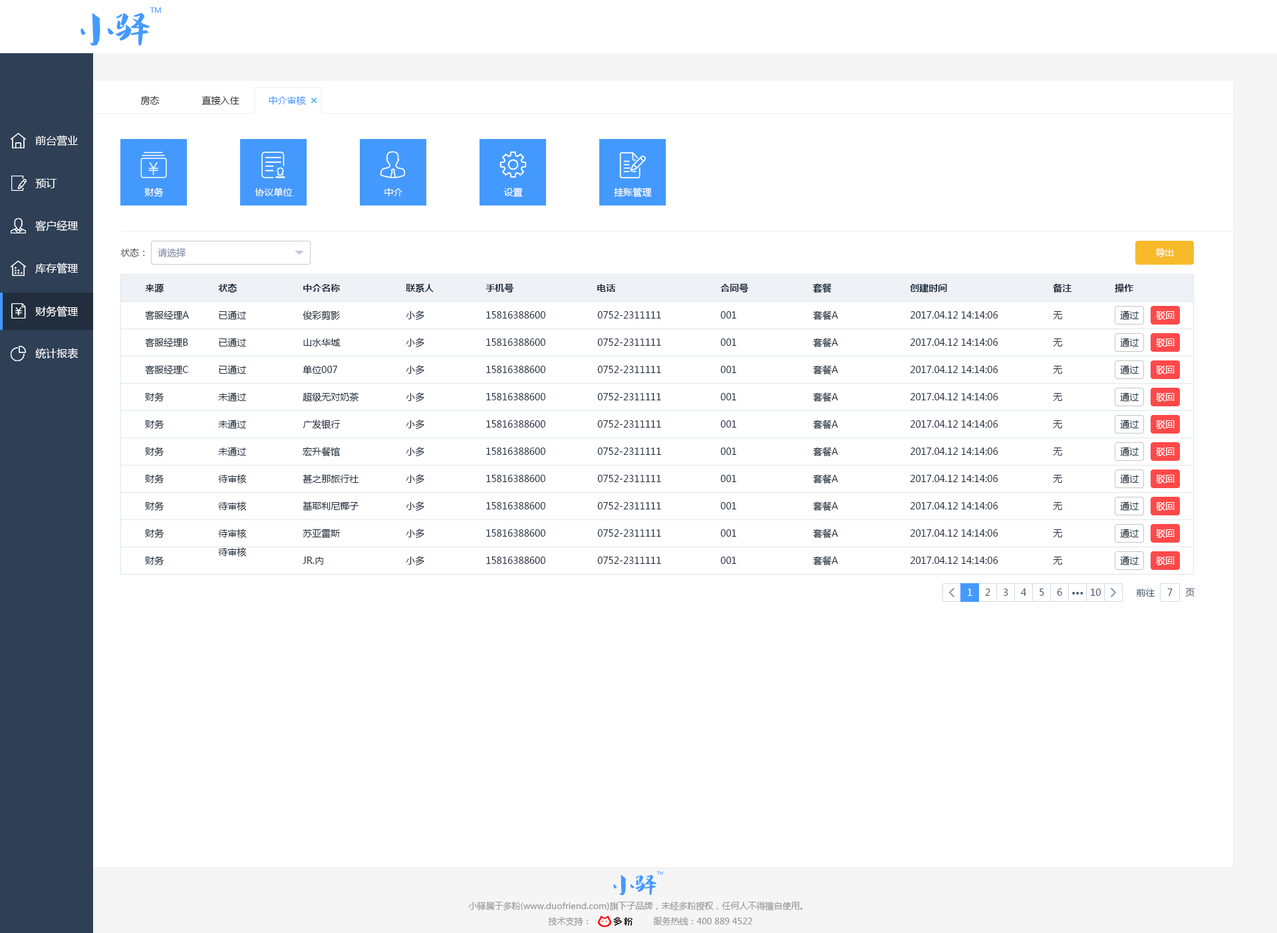
<style>
.page{position:relative;width:1277px;height:933px;background:#ffffff}
.page>*{position:absolute;margin:0}
.t1{font:9.3px "MicrosoftYaHei";color:#333333}
.t2{font:9.3px "MicrosoftYaHei";color:#4499ff}
.t3{font:10.6px "MicrosoftYaHei";color:#ffffff}
.t4{font:9.3px "MicrosoftYaHei";color:#ffffff}
.t5{font:9.3px "MicrosoftYaHei";color:#505050}
.t6{font:9.3px "MicrosoftYaHei";color:#8391a5}
.t7{font:9.3px "MicrosoftYaHei-Bold";color:#1f2d3d}
.t8{font:9.3px "MicrosoftYaHei";color:#1f2d3d}
.t9{font:9.3px "MicrosoftYaHei";color:#48576a}
.t10{font:9.3px "MicrosoftYaHei-Bold";color:#48576a}
.t11{font:8.6px "MicrosoftYaHei";color:#999999}
</style>
<div class="page">
<p class="t1" style="left:140px;top:96px;width:20px;height:9px">房态</p>
<p class="t1" style="left:202px;top:96px;width:38px;height:9px">直接入住</p>
<p class="t2" style="left:269px;top:96px;width:37px;height:10px">中介审核</p>
<p class="t3" style="left:35px;top:135px;width:44px;height:11px">前台营业</p>
<p class="t3" style="left:35px;top:178px;width:22px;height:10px">预订</p>
<p class="t4" style="left:144px;top:188px;width:20px;height:9px">财务</p>
<p class="t4" style="left:255px;top:188px;width:38px;height:9px">协议单位</p>
<p class="t4" style="left:385px;top:188px;width:18px;height:8px">中介</p>
<p class="t4" style="left:504px;top:188px;width:19px;height:9px">设置</p>
<p class="t4" style="left:614px;top:188px;width:38px;height:10px">挂账管理</p>
<p class="t3" style="left:35px;top:220px;width:44px;height:12px">客户经理</p>
<p class="t5" style="left:120px;top:248px;width:25px;height:9px">状态：</p>
<p class="t6" style="left:158px;top:248px;width:28px;height:9px">请选择</p>
<p class="t4" style="left:1156px;top:248px;width:18px;height:9px">导出</p>
<p class="t3" style="left:35px;top:263px;width:44px;height:11px">库存管理</p>
<p class="t7" style="left:145px;top:283px;width:19px;height:10px">来源</p>
<p class="t7" style="left:218px;top:283px;width:19px;height:10px">状态</p>
<p class="t7" style="left:303px;top:284px;width:37px;height:8px">中介名称</p>
<p class="t7" style="left:406px;top:283px;width:28px;height:10px">联系人</p>
<p class="t7" style="left:486px;top:283px;width:28px;height:10px">手机号</p>
<p class="t7" style="left:597px;top:284px;width:19px;height:8px">电话</p>
<p class="t7" style="left:721px;top:283px;width:27px;height:10px">合同号</p>
<p class="t7" style="left:813px;top:283px;width:19px;height:10px">套餐</p>
<p class="t7" style="left:910px;top:283px;width:37px;height:10px">创建时间</p>
<p class="t7" style="left:1053px;top:283px;width:20px;height:10px">备注</p>
<p class="t7" style="left:1115px;top:283px;width:19px;height:10px">操作</p>
<p class="t3" style="left:35px;top:306px;width:44px;height:11px">财务管理</p>
<p class="t8" style="left:145px;top:311px;width:44px;height:9px">客服经理A</p>
<p class="t8" style="left:219px;top:311px;width:27px;height:9px">已通过</p>
<p class="t8" style="left:303px;top:311px;width:37px;height:10px">俊彩剪影</p>
<p class="t8" style="left:406px;top:311px;width:18px;height:10px">小多</p>
<p class="t8" style="left:486px;top:311px;width:60px;height:8px">15816388600</p>
<p class="t8" style="left:597px;top:311px;width:64px;height:8px">0752-2311111</p>
<p class="t8" style="left:721px;top:311px;width:16px;height:8px">001</p>
<p class="t8" style="left:813px;top:311px;width:25px;height:10px">套餐A</p>
<p class="t8" style="left:910px;top:311px;width:89px;height:8px">2017.04.12 14:14:06</p>
<p class="t8" style="left:1053px;top:311px;width:10px;height:8px">无</p>
<p class="t8" style="left:1120px;top:311px;width:19px;height:9px">通过</p>
<p class="t4" style="left:1156px;top:311px;width:19px;height:9px">驳回</p>
<p class="t8" style="left:145px;top:338px;width:43px;height:9px">客服经理B</p>
<p class="t8" style="left:219px;top:338px;width:27px;height:9px">已通过</p>
<p class="t8" style="left:303px;top:339px;width:38px;height:8px">山水华城</p>
<p class="t8" style="left:406px;top:338px;width:18px;height:10px">小多</p>
<p class="t8" style="left:486px;top:339px;width:60px;height:7px">15816388600</p>
<p class="t8" style="left:597px;top:339px;width:64px;height:7px">0752-2311111</p>
<p class="t8" style="left:721px;top:339px;width:16px;height:7px">001</p>
<p class="t8" style="left:813px;top:338px;width:25px;height:10px">套餐A</p>
<p class="t8" style="left:910px;top:339px;width:89px;height:7px">2017.04.12 14:14:06</p>
<p class="t8" style="left:1053px;top:339px;width:10px;height:8px">无</p>
<p class="t8" style="left:1120px;top:338px;width:19px;height:9px">通过</p>
<p class="t4" style="left:1156px;top:338px;width:19px;height:9px">驳回</p>
<p class="t3" style="left:35px;top:348px;width:44px;height:11px">统计报表</p>
<p class="t8" style="left:145px;top:365px;width:43px;height:10px">客服经理C</p>
<p class="t8" style="left:219px;top:365px;width:27px;height:10px">已通过</p>
<p class="t8" style="left:303px;top:365px;width:34px;height:10px">单位007</p>
<p class="t8" style="left:406px;top:365px;width:18px;height:10px">小多</p>
<p class="t8" style="left:486px;top:366px;width:60px;height:7px">15816388600</p>
<p class="t8" style="left:597px;top:366px;width:64px;height:7px">0752-2311111</p>
<p class="t8" style="left:721px;top:366px;width:16px;height:7px">001</p>
<p class="t8" style="left:813px;top:365px;width:25px;height:10px">套餐A</p>
<p class="t8" style="left:910px;top:366px;width:89px;height:7px">2017.04.12 14:14:06</p>
<p class="t8" style="left:1053px;top:366px;width:10px;height:8px">无</p>
<p class="t8" style="left:1120px;top:365px;width:19px;height:10px">通过</p>
<p class="t4" style="left:1156px;top:365px;width:19px;height:10px">驳回</p>
<p class="t8" style="left:145px;top:393px;width:19px;height:9px">财务</p>
<p class="t8" style="left:218px;top:393px;width:28px;height:9px">未通过</p>
<p class="t8" style="left:303px;top:393px;width:56px;height:9px">超级无对奶茶</p>
<p class="t8" style="left:406px;top:393px;width:18px;height:10px">小多</p>
<p class="t8" style="left:486px;top:393px;width:60px;height:8px">15816388600</p>
<p class="t8" style="left:597px;top:393px;width:64px;height:8px">0752-2311111</p>
<p class="t8" style="left:721px;top:393px;width:16px;height:8px">001</p>
<p class="t8" style="left:813px;top:393px;width:25px;height:10px">套餐A</p>
<p class="t8" style="left:910px;top:393px;width:89px;height:8px">2017.04.12 14:14:06</p>
<p class="t8" style="left:1053px;top:393px;width:10px;height:8px">无</p>
<p class="t8" style="left:1120px;top:393px;width:19px;height:9px">通过</p>
<p class="t4" style="left:1156px;top:393px;width:19px;height:9px">驳回</p>
<p class="t8" style="left:145px;top:420px;width:19px;height:9px">财务</p>
<p class="t8" style="left:218px;top:420px;width:28px;height:9px">未通过</p>
<p class="t8" style="left:303px;top:420px;width:38px;height:9px">广发银行</p>
<p class="t8" style="left:406px;top:420px;width:18px;height:10px">小多</p>
<p class="t8" style="left:486px;top:420px;width:60px;height:8px">15816388600</p>
<p class="t8" style="left:597px;top:420px;width:64px;height:8px">0752-2311111</p>
<p class="t8" style="left:721px;top:420px;width:16px;height:8px">001</p>
<p class="t8" style="left:813px;top:420px;width:25px;height:10px">套餐A</p>
<p class="t8" style="left:910px;top:420px;width:89px;height:8px">2017.04.12 14:14:06</p>
<p class="t8" style="left:1053px;top:420px;width:10px;height:8px">无</p>
<p class="t8" style="left:1120px;top:420px;width:19px;height:9px">通过</p>
<p class="t4" style="left:1156px;top:420px;width:19px;height:9px">驳回</p>
<p class="t8" style="left:145px;top:447px;width:19px;height:9px">财务</p>
<p class="t8" style="left:218px;top:447px;width:28px;height:9px">未通过</p>
<p class="t8" style="left:303px;top:447px;width:37px;height:10px">宏升餐馆</p>
<p class="t8" style="left:406px;top:447px;width:18px;height:10px">小多</p>
<p class="t8" style="left:486px;top:448px;width:60px;height:7px">15816388600</p>
<p class="t8" style="left:597px;top:448px;width:64px;height:7px">0752-2311111</p>
<p class="t8" style="left:721px;top:448px;width:16px;height:7px">001</p>
<p class="t8" style="left:813px;top:447px;width:25px;height:10px">套餐A</p>
<p class="t8" style="left:910px;top:448px;width:89px;height:7px">2017.04.12 14:14:06</p>
<p class="t8" style="left:1053px;top:448px;width:10px;height:8px">无</p>
<p class="t8" style="left:1120px;top:447px;width:19px;height:9px">通过</p>
<p class="t4" style="left:1156px;top:447px;width:19px;height:9px">驳回</p>
<p class="t8" style="left:145px;top:474px;width:19px;height:10px">财务</p>
<p class="t8" style="left:218px;top:474px;width:29px;height:10px">待审核</p>
<p class="t8" style="left:303px;top:474px;width:56px;height:10px">甚之那旅行社</p>
<p class="t8" style="left:406px;top:474px;width:18px;height:10px">小多</p>
<p class="t8" style="left:486px;top:475px;width:60px;height:7px">15816388600</p>
<p class="t8" style="left:597px;top:475px;width:64px;height:7px">0752-2311111</p>
<p class="t8" style="left:721px;top:475px;width:16px;height:7px">001</p>
<p class="t8" style="left:813px;top:474px;width:25px;height:10px">套餐A</p>
<p class="t8" style="left:910px;top:475px;width:89px;height:7px">2017.04.12 14:14:06</p>
<p class="t8" style="left:1053px;top:475px;width:10px;height:8px">无</p>
<p class="t8" style="left:1120px;top:474px;width:19px;height:10px">通过</p>
<p class="t4" style="left:1156px;top:474px;width:19px;height:10px">驳回</p>
<p class="t8" style="left:145px;top:502px;width:19px;height:9px">财务</p>
<p class="t8" style="left:218px;top:502px;width:29px;height:10px">待审核</p>
<p class="t8" style="left:303px;top:502px;width:56px;height:9px">基耶利尼椰子</p>
<p class="t8" style="left:406px;top:502px;width:18px;height:10px">小多</p>
<p class="t8" style="left:486px;top:502px;width:60px;height:8px">15816388600</p>
<p class="t8" style="left:597px;top:502px;width:64px;height:8px">0752-2311111</p>
<p class="t8" style="left:721px;top:502px;width:16px;height:8px">001</p>
<p class="t8" style="left:813px;top:502px;width:25px;height:10px">套餐A</p>
<p class="t8" style="left:910px;top:502px;width:89px;height:8px">2017.04.12 14:14:06</p>
<p class="t8" style="left:1053px;top:502px;width:10px;height:8px">无</p>
<p class="t8" style="left:1120px;top:502px;width:19px;height:9px">通过</p>
<p class="t4" style="left:1156px;top:502px;width:19px;height:9px">驳回</p>
<p class="t8" style="left:145px;top:529px;width:19px;height:9px">财务</p>
<p class="t8" style="left:218px;top:529px;width:29px;height:10px">待审核</p>
<p class="t8" style="left:303px;top:529px;width:38px;height:10px">苏亚雷斯</p>
<p class="t8" style="left:406px;top:529px;width:18px;height:10px">小多</p>
<p class="t8" style="left:486px;top:530px;width:60px;height:7px">15816388600</p>
<p class="t8" style="left:597px;top:530px;width:64px;height:7px">0752-2311111</p>
<p class="t8" style="left:721px;top:530px;width:16px;height:7px">001</p>
<p class="t8" style="left:813px;top:529px;width:25px;height:10px">套餐A</p>
<p class="t8" style="left:910px;top:530px;width:89px;height:7px">2017.04.12 14:14:06</p>
<p class="t8" style="left:1053px;top:530px;width:10px;height:8px">无</p>
<p class="t8" style="left:1120px;top:529px;width:19px;height:9px">通过</p>
<p class="t4" style="left:1156px;top:529px;width:19px;height:9px">驳回</p>
<p class="t8" style="left:145px;top:556px;width:19px;height:10px">财务</p>
<p class="t8" style="left:218px;top:548px;width:29px;height:10px">待审核</p>
<p class="t8" style="left:303px;top:557px;width:20px;height:8px">JR.内</p>
<p class="t8" style="left:406px;top:556px;width:18px;height:10px">小多</p>
<p class="t8" style="left:486px;top:557px;width:60px;height:7px">15816388600</p>
<p class="t8" style="left:597px;top:557px;width:64px;height:7px">0752-2311111</p>
<p class="t8" style="left:721px;top:557px;width:16px;height:7px">001</p>
<p class="t8" style="left:813px;top:556px;width:25px;height:10px">套餐A</p>
<p class="t8" style="left:910px;top:557px;width:89px;height:7px">2017.04.12 14:14:06</p>
<p class="t8" style="left:1053px;top:557px;width:10px;height:8px">无</p>
<p class="t8" style="left:1120px;top:556px;width:19px;height:10px">通过</p>
<p class="t4" style="left:1156px;top:556px;width:19px;height:10px">驳回</p>
<p class="t4" style="left:968px;top:589px;width:5px;height:7px">1</p>
<p class="t9" style="left:985px;top:589px;width:6px;height:7px">2</p>
<p class="t9" style="left:1003px;top:589px;width:6px;height:7px">3</p>
<p class="t9" style="left:1021px;top:589px;width:6px;height:7px">4</p>
<p class="t9" style="left:1040px;top:589px;width:5px;height:7px">5</p>
<p class="t9" style="left:1057px;top:589px;width:6px;height:7px">6</p>
<p class="t10" style="left:1073px;top:592px;width:11px;height:3px">···</p>
<p class="t9" style="left:1091px;top:589px;width:10px;height:7px">10</p>
<p class="t9" style="left:1136px;top:589px;width:20px;height:8px">前往</p>
<p class="t9" style="left:1168px;top:589px;width:5px;height:7px">7</p>
<p class="t9" style="left:1186px;top:589px;width:9px;height:8px">页</p>
<p class="t11" style="left:468px;top:902px;width:335px;height:9px">小驿属于多粉(www.duofriend.com)旗下子品牌，未经多粉授权，任何人不得擅自使用。</p>
<p class="t11" style="left:548px;top:917px;width:40px;height:9px">技术支持：</p>
<p class="t11" style="left:653px;top:917px;width:99px;height:9px">服务热线：400 889 4522</p>
</div>
